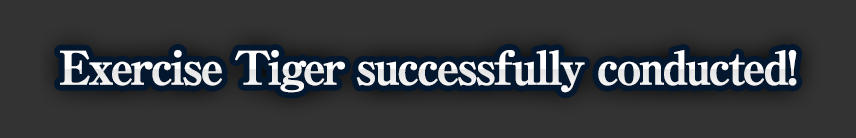
<style>
.page{position:relative;width:856px;height:138px;background:#333333}
.page>*{position:absolute;margin:0}
.t1{font:46px "RyuminPro-ExBold";letter-spacing:-0.08em;color:#ffffff;font-weight:bold}
</style>
<div class="page">
<p class="t1" style="left:60px;top:50px;width:737px;height:43px">Exercise Tiger successfully conducted!</p>
</div>
